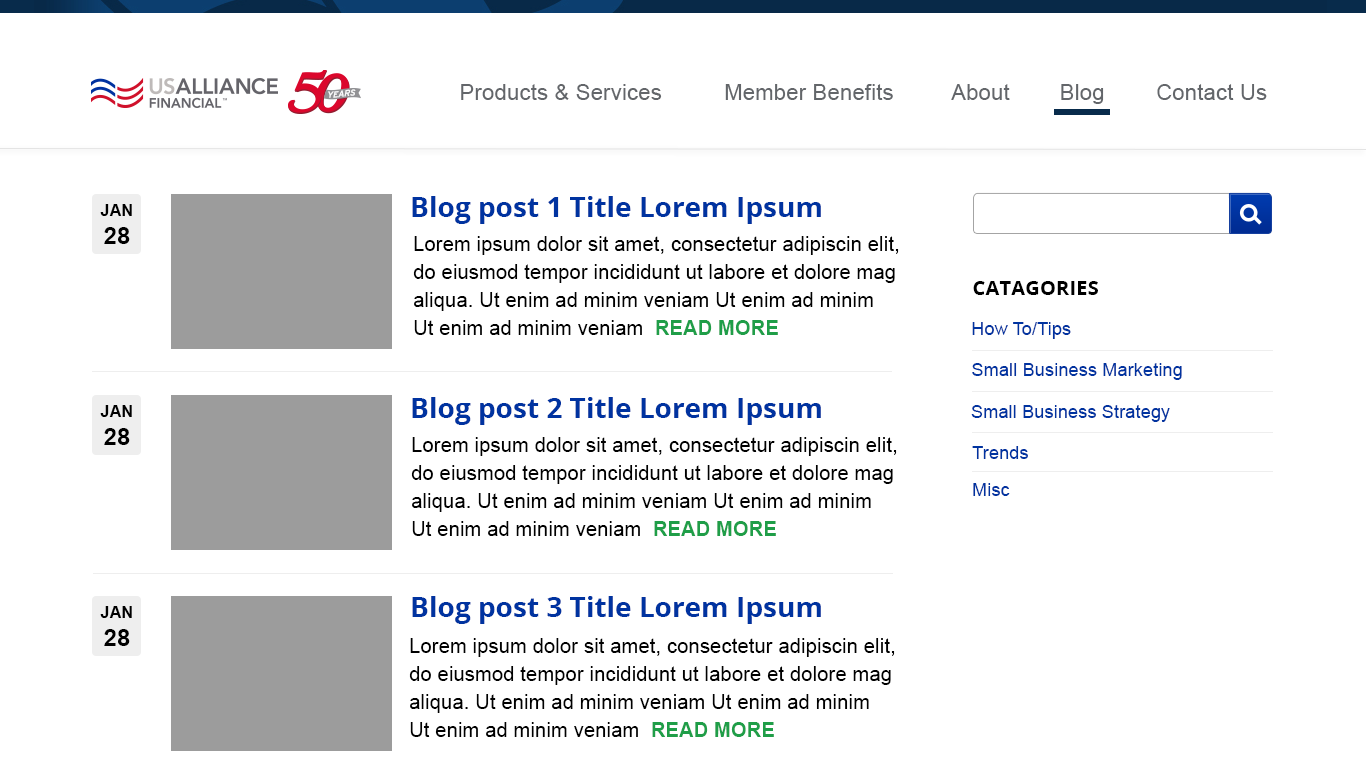
<style>
.page{position:relative;width:1366px;height:768px;background:#ffffff}
.page>*{position:absolute;margin:0}
.t1{font:22px "ArialMT";letter-spacing:0.01em;color:#63666a}
.t2{font:28px "OpenSans-Bold";color:#0033a0}
.t3{font:16px/28px "Arial-BoldMT";letter-spacing:0.01em;color:#000000}
.t4{font:24px/28px "Arial-BoldMT";letter-spacing:0.01em;color:#000000}
.t5{font:20px/28px "ArialMT";letter-spacing:0.01em;color:#000000}
.t6{font:20px/28px "Arial-BoldMT";letter-spacing:0.01em;color:#1f9e48}
.t7{font:20px "OpenSans-Bold";letter-spacing:0.01em;color:#000000}
.t8{font:18px "ArialMT";letter-spacing:0.01em;color:#0033a0}
</style>
<div class="page">
<p class="t1" style="left:461px;top:84px;width:201px;height:16px">Products &amp; Services</p>
<p class="t1" style="left:725px;top:84px;width:168px;height:16px">Member Benefits</p>
<p class="t1" style="left:951px;top:84px;width:59px;height:16px">About</p>
<p class="t1" style="left:1061px;top:84px;width:43px;height:20px">Blog</p>
<p class="t1" style="left:1157px;top:84px;width:110px;height:16px">Contact Us</p>
<p class="t2" style="left:412px;top:196px;width:409px;height:28px">Blog post 1 Title Lorem Ipsum</p>
<p class="t3" style="left:100px;top:204px;width:32px;height:40px;text-align:center">JAN<br><span class="t4">28</span></p>
<p class="t5" style="left:413px;top:236px;width:486px;height:99px">Lorem ipsum dolor sit amet, consectetur adipiscin elit, <br>do eiusmod tempor incididunt ut labore et dolore mag<br>aliqua. Ut enim ad minim veniam Ut enim ad minim <br>Ut enim ad minim veniam  <span class="t6">READ MORE</span></p>
<p class="t7" style="left:973px;top:281px;width:125px;height:14px">CATAGORIES</p>
<p class="t8" style="left:972px;top:322px;width:99px;height:17px">How To/Tips</p>
<p class="t8" style="left:972px;top:363px;width:210px;height:17px">Small Business Marketing</p>
<p class="t2" style="left:412px;top:397px;width:409px;height:28px">Blog post 2 Title Lorem Ipsum</p>
<p class="t3" style="left:100px;top:405px;width:32px;height:40px;text-align:center">JAN<br><span class="t4">28</span></p>
<p class="t8" style="left:971px;top:405px;width:199px;height:17px">Small Business Strategy</p>
<p class="t5" style="left:411px;top:437px;width:486px;height:99px">Lorem ipsum dolor sit amet, consectetur adipiscin elit, <br>do eiusmod tempor incididunt ut labore et dolore mag<br>aliqua. Ut enim ad minim veniam Ut enim ad minim <br>Ut enim ad minim veniam  <span class="t6">READ MORE</span></p>
<p class="t8" style="left:972px;top:446px;width:56px;height:13px">Trends</p>
<p class="t8" style="left:973px;top:483px;width:37px;height:13px">Misc</p>
<p class="t3" style="left:100px;top:606px;width:32px;height:40px;text-align:center">JAN<br><span class="t4">28</span></p>
<p class="t2" style="left:412px;top:596px;width:409px;height:28px">Blog post 3 Title Lorem Ipsum</p>
<p class="t5" style="left:409px;top:638px;width:486px;height:99px">Lorem ipsum dolor sit amet, consectetur adipiscin elit, <br>do eiusmod tempor incididunt ut labore et dolore mag<br>aliqua. Ut enim ad minim veniam Ut enim ad minim <br>Ut enim ad minim veniam  <span class="t6">READ MORE</span></p>
</div>
